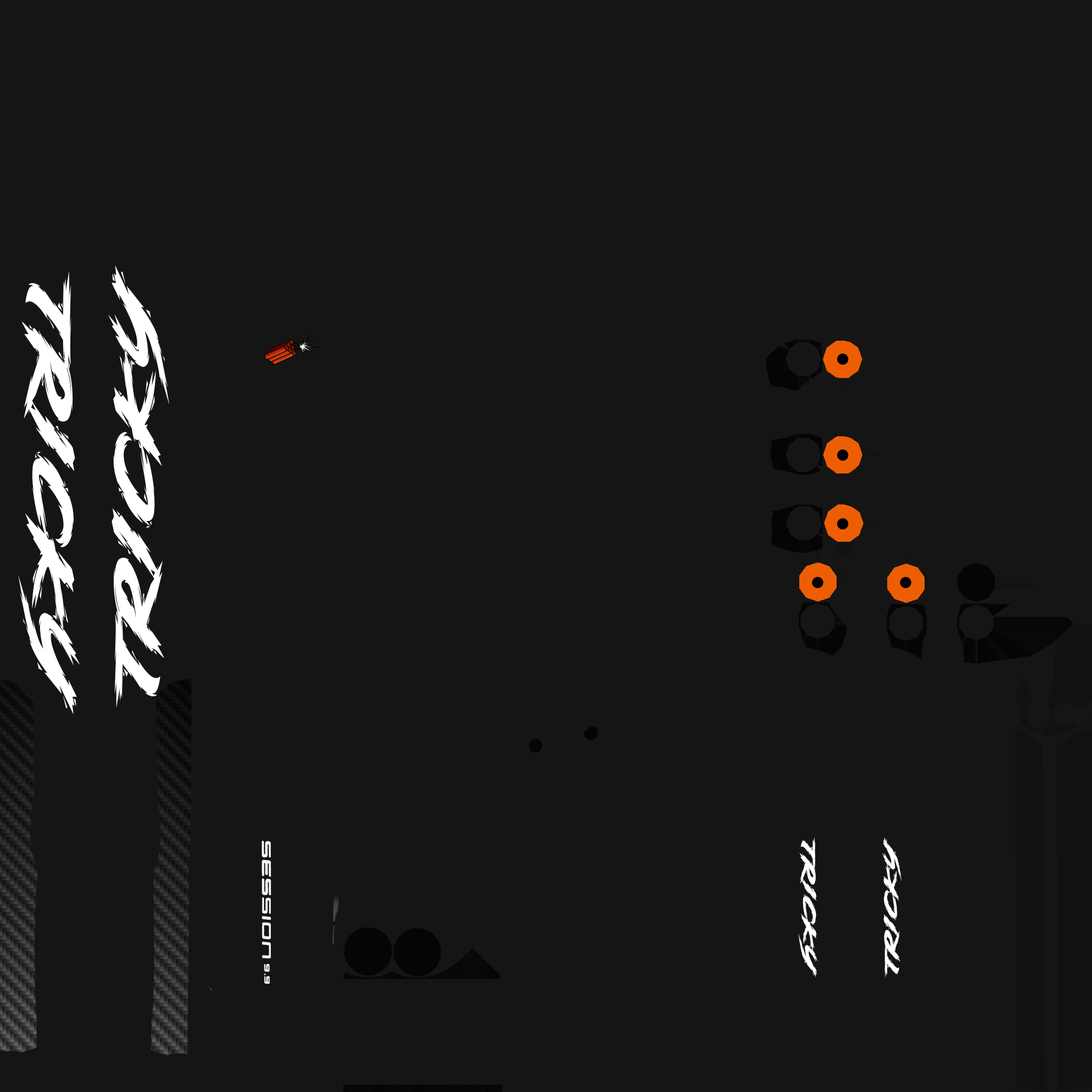
<style>
.page{position:relative;width:1092px;height:1092px;background:#151515}
.page>*{position:absolute;margin:0}
.t1{font:65.7px "Madjoe";color:#ffffff;scale:2.81 1}
.t2{font:20.8px "Madjoe";color:#ffffff;scale:2.81 1}
</style>
<div class="page">
<p class="t1" style="left:108px;top:266px;width:62px;height:442px;rotate:-90deg">TRICKY</p>
<p class="t1" style="left:18px;top:271px;width:62px;height:443px;rotate:90deg">TRICKY</p>
<p class="t2" style="left:798px;top:837px;width:20px;height:140px;rotate:90deg">TRICKY</p>
<p class="t2" style="left:882px;top:837px;width:20px;height:141px;rotate:-90deg">TRICKY</p>
</div>
